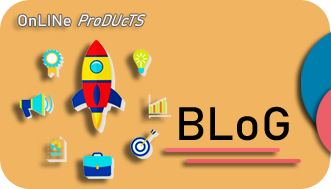
<style>
.page{position:relative;width:331px;height:189px;background:#f1b561}
.page>*{position:absolute;margin:0}
.t1{font:15.7px "Bahnschrift";color:#f6f5ef;scale:1.05 1}
.t2{font:17.3px "Bahnschrift";color:#f8f7f2;scale:0.87 1}
.t3{font:46.3px "Bahnschrift";color:#010101;scale:1.05 1}
</style>
<div class="page">
<p class="t1" style="left:18px;top:14px;width:53px;height:13px">OnLINe</p>
<p class="t2" style="left:77px;top:14px;width:69px;height:13px">ProDUcTS</p>
<p class="t3" style="left:179px;top:106px;width:110px;height:35px">BLoG</p>
</div>
